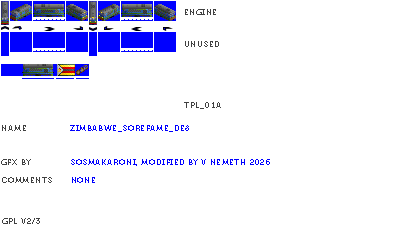
<style>
.page{position:relative;width:400px;height:230px;background:#ffffff}
.page>*{position:absolute;margin:0}
.t1{font:8px "Museo700-Regular";letter-spacing:0.075em;color:#404040;text-transform:uppercase}
.t2{font:8px "Museo700-Regular";letter-spacing:0.075em;color:#0000ff;text-transform:uppercase}
</style>
<div class="page">
<p class="t1" style="left:185px;top:9px;width:31px;height:6px">engine</p>
<p class="t1" style="left:185px;top:41px;width:34px;height:6px">unused</p>
<p class="t1" style="left:184px;top:102px;width:37px;height:7px">tpl_01a</p>
<p class="t1" style="left:2px;top:125px;width:24px;height:6px">name</p>
<p class="t2" style="left:70px;top:125px;width:119px;height:7px">Zimbabwe_Sorefame_DE8</p>
<p class="t1" style="left:1px;top:159px;width:30px;height:6px">gfx by</p>
<p class="t2" style="left:71px;top:159px;width:199px;height:7px">sosmakaroni, modified by v nemeth 2026</p>
<p class="t1" style="left:2px;top:177px;width:50px;height:6px">comments</p>
<p class="t2" style="left:72px;top:177px;width:23px;height:6px">none</p>
<p class="t1" style="left:2px;top:218px;width:38px;height:6px">gpl v2/3</p>
</div>
